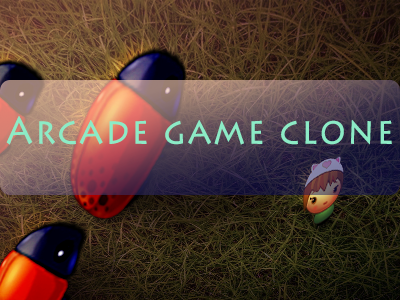
<style>
.page{position:relative;width:400px;height:300px}
.page>*{position:absolute;margin:0}
.t1{font:37.1px "LithosPro-Regular";letter-spacing:0.05em;color:#8cebc6;font-weight:bold;scale:0.89 1}
</style>
<div class="page">
<p class="t1" style="left:6px;top:116px;width:386px;height:29px">Arcade game clone</p>
</div>
